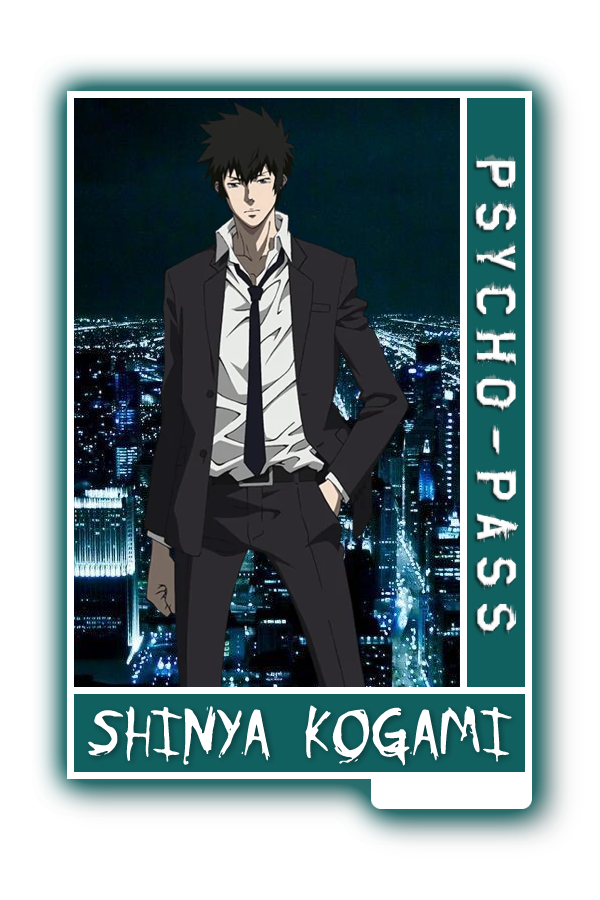
<style>
.page{position:relative;width:600px;height:900px;background:#ffffff}
.page>*{position:absolute;margin:0}
.t1{font:62.7px "Psycho-Poetry";color:#ffffff}
</style>
<div class="page">
<p class="t1" style="left:88px;top:705px;width:424px;height:61px">SHINYA KOGAMI</p>
</div>
